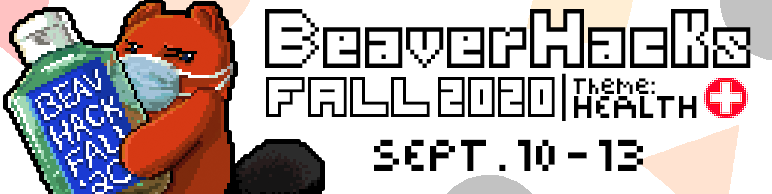
<style>
.page{position:relative;width:772px;height:194px;background:#ffffff}
.page>*{position:absolute;margin:0}
.t1{font:49.3px "Thirteen-Pixel-Fonts";color:#000000;scale:0.96 1}
.t2{font:25px "Pixel-Block-BB";color:#000000}
.t3{font:35px "Pixel-Block-BB";color:#000000}
.t4{font:50px "Pixel-Block-BB";color:#000000}
</style>
<div class="page">
<p class="t1" style="left:266px;top:77px;width:164px;height:40px">FALL</p>
<p class="t1" style="left:438px;top:77px;width:117px;height:40px">2020</p>
<p class="t2" style="left:573px;top:78px;width:82px;height:16px">Theme:</p>
<p class="t3" style="left:574px;top:96px;width:123px;height:22px">HEALTH</p>
<p class="t4" style="left:374px;top:139px;width:269px;height:32px">SEPT. 10 - 13</p>
</div>
